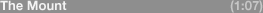
<style>
.page{position:relative;width:263px;height:13px;background:#8e8e8e}
.page>*{position:absolute;margin:0}
.t1{font:13px "HelveticaNeue-Bold";color:#f3f3f3}
.t2{font:13px "HelveticaNeue-Bold";color:#c6c6c6}
</style>
<div class="page">
<p class="t1" style="left:0px;top:0px;width:67px;height:11px">The Mount</p>
<p class="t2" style="left:230px;top:0px;width:33px;height:13px">(1:07)</p>
</div>
